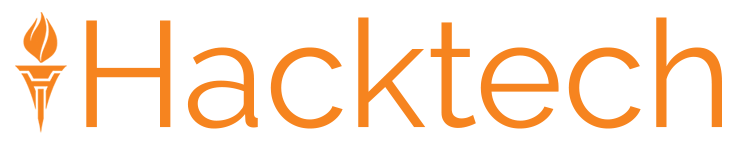
<style>
.page{position:relative;width:750px;height:142px;background:#ffffff}
.page>*{position:absolute;margin:0}
.t1{font:150px "Raleway-Regular";color:#f6841f}
</style>
<div class="page">
<p class="t1" style="left:86px;top:17px;width:636px;height:112px">Hacktech</p>
</div>
